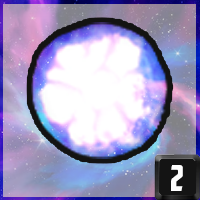
<style>
.page{position:relative;width:200px;height:200px}
.page>*{position:absolute;margin:0}
.t1{font:35.2px "AmericanCaptain";color:#ffffff}
</style>
<div class="page">
<p class="t1" style="left:171px;top:165px;width:12px;height:26px">2</p>
</div>
